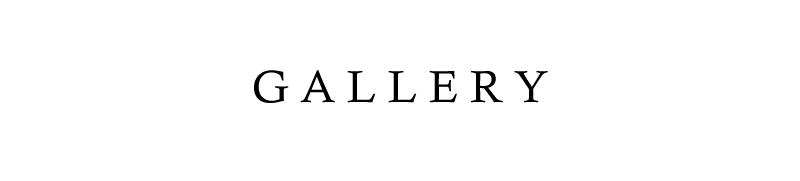
<style>
.page{position:relative;width:800px;height:181px;background:#ffffff}
.page>*{position:absolute;margin:0}
.t1{font:45px "CalistoMT";color:#000000}
</style>
<div class="page">
<p class="t1" style="left:254px;top:70px;width:294px;height:33px">G A L L E R Y</p>
</div>
